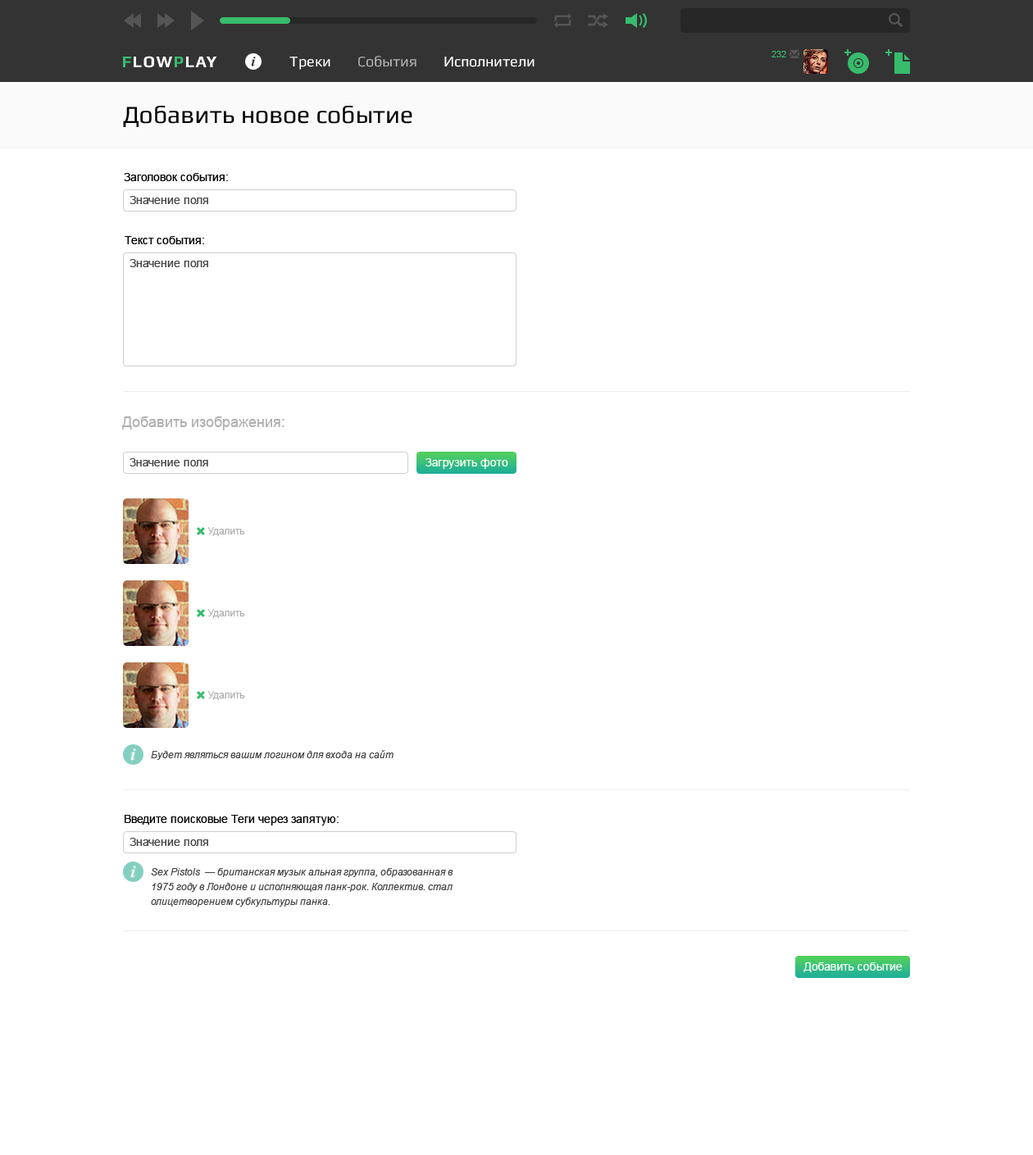
<style>
.page{position:relative;width:1033px;height:1155px;background:#ffffff}
.page>*{position:absolute;margin:0}
.t1{font:24.6px "Play";color:#000000}
.t2{font:11.5px "ArialMT";color:#000000}
.t3{font:11.5px "ArialMT";color:#444444}
.t4{font:14.8px "ArialMT";color:#afafaf}
.t5{font:11.5px "ArialMT";color:#ffffff}
.t6{font:9.8px "ArialMT";color:#afafaf}
.t7{font:9.8px "Arial-ItalicMT";color:#444444}
.t8{font:9.8px/14.8px "Arial-ItalicMT";color:#444444}
</style>
<div class="page">
<p class="t1" style="left:123px;top:106px;width:289px;height:21px">Добавить новое событие</p>
<p class="t2" style="left:124px;top:173px;width:104px;height:8px">Заголовок события:</p>
<p class="t3" style="left:129px;top:196px;width:79px;height:8px">Значение поля</p>
<p class="t2" style="left:125px;top:236px;width:79px;height:8px">Текст события:</p>
<p class="t3" style="left:129px;top:259px;width:79px;height:8px">Значение поля</p>
<p class="t4" style="left:121px;top:416px;width:163px;height:14px">Добавить изображения:</p>
<p class="t3" style="left:129px;top:458px;width:79px;height:8px">Значение поля</p>
<p class="t5" style="left:425px;top:458px;width:83px;height:11px">Загрузить фото</p>
<p class="t6" style="left:207px;top:527px;width:38px;height:9px">Удалить</p>
<p class="t6" style="left:207px;top:609px;width:38px;height:9px">Удалить</p>
<p class="t6" style="left:207px;top:691px;width:38px;height:9px">Удалить</p>
<p class="t7" style="left:151px;top:750px;width:242px;height:10px">Будет являться вашим логином для входа на сайт</p>
<p class="t2" style="left:125px;top:815px;width:213px;height:10px">Введите поисковые Теги через запятую:</p>
<p class="t3" style="left:129px;top:838px;width:79px;height:8px">Значение поля</p>
<p class="t8" style="left:151px;top:868px;width:302px;height:38px">Sex Pistols  — британская музык альная группа, образованная в 1975 году в Лондоне и исполняющая панк-рок. Коллектив. стал олицетворением субкультуры панка.</p>
<p class="t5" style="left:803px;top:962px;width:99px;height:10px">Добавить событие</p>
</div>
